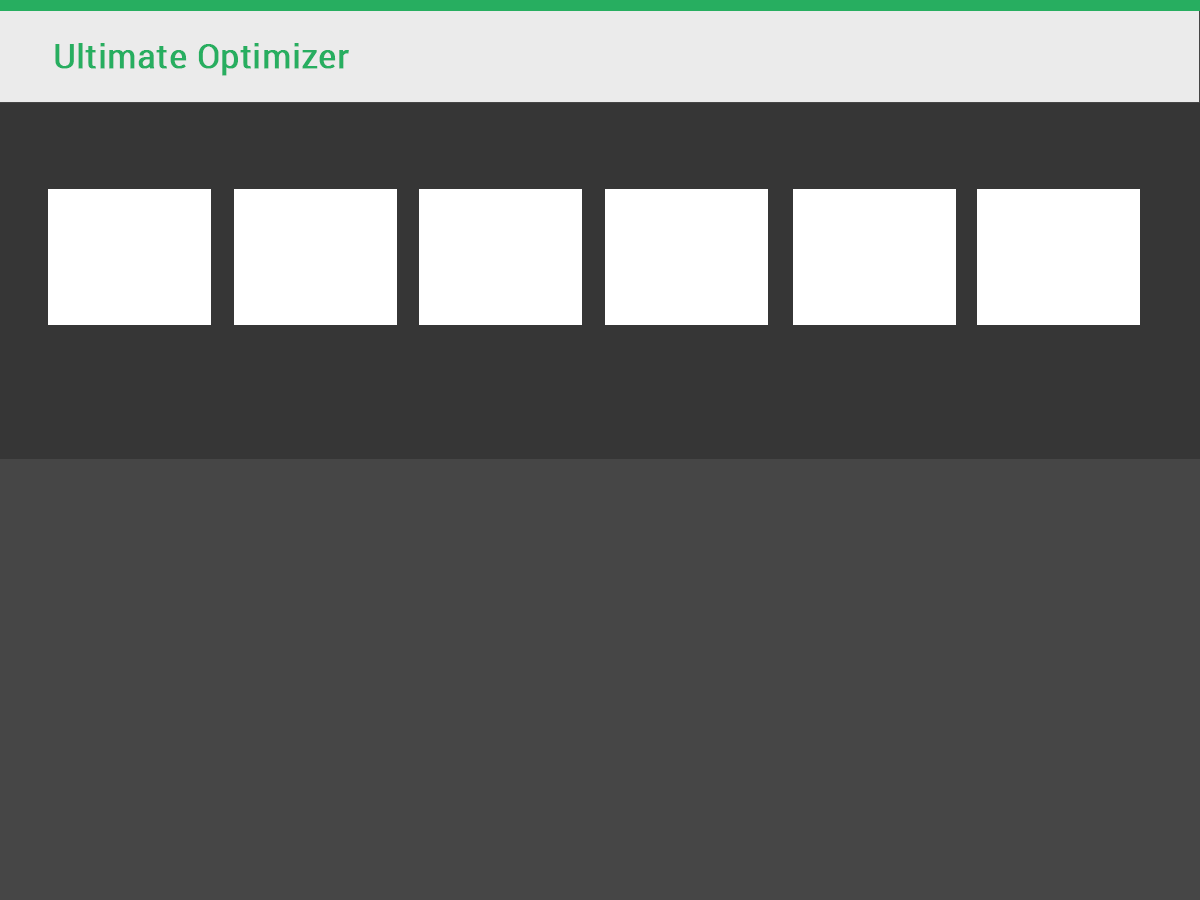
<style>
.page{position:relative;width:1200px;height:900px;background:#464646}
.page>*{position:absolute;margin:0}
.t1{font:33.3px "Roboto-Regular";color:#27ae60;font-weight:bold}
</style>
<div class="page">
<p class="t1" style="left:55px;top:43px;width:294px;height:33px">Ultimate Optimizer</p>
</div>
